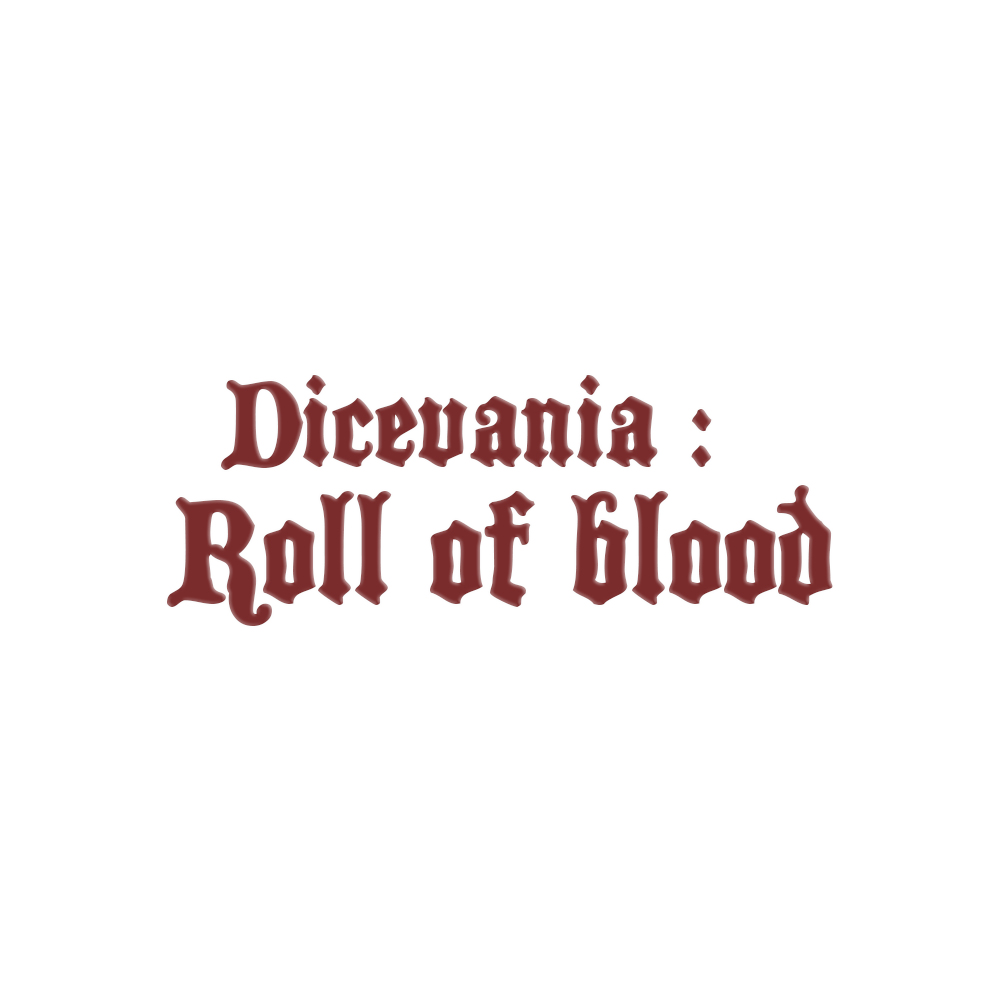
<style>
.page{position:relative;width:1000px;height:1000px;background:#ffffff}
.page>*{position:absolute;margin:0}
.t1{font:123.8px "BlackCastleMF";color:#7c2e2e}
.t2{font:150px "BlackCastleMF";color:#7a2b2b}
</style>
<div class="page">
<p class="t1" style="left:221px;top:375px;width:491px;height:95px">Dicevania :</p>
<p class="t2" style="left:167px;top:485px;width:666px;height:141px">Roll of blood</p>
</div>
